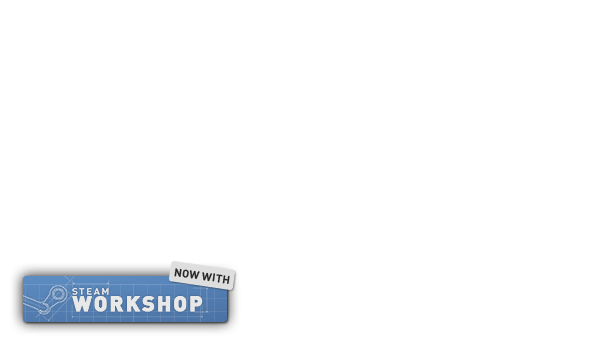
<style>
.page{position:relative;width:616px;height:353px;background:#ffffff}
.page>*{position:absolute;margin:0}
.t1{font:11.1px "DIN-Bold";color:#282828;text-transform:uppercase}
.t2{font:21.1px "DIN-Black";letter-spacing:0.08em;color:#e8e8e8;text-transform:uppercase;font-weight:bold}
</style>
<div class="page">
<p class="t1" style="left:174px;top:268px;width:56px;height:16px;rotate:8deg">NOW WITH</p>
<p class="t2" style="left:72px;top:296px;width:131px;height:16px">Workshop</p>
</div>
